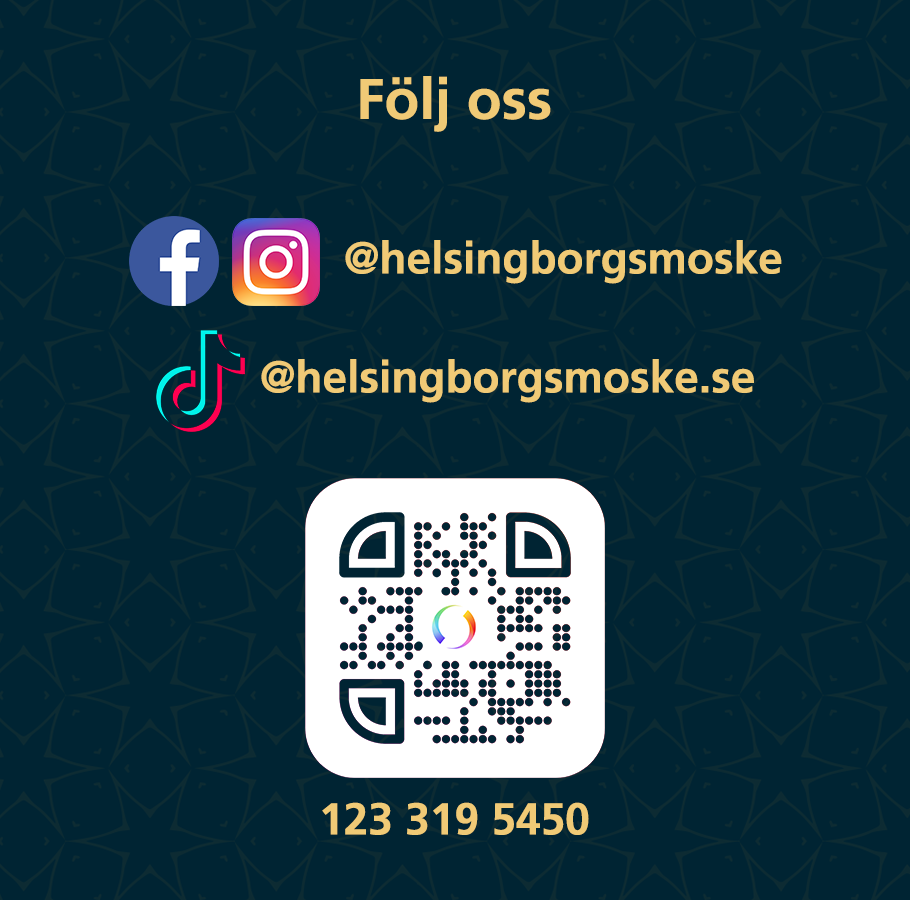
<style>
.page{position:relative;width:910px;height:900px;background:#002433}
.page>*{position:absolute;margin:0}
.t1{font:57.1px "FrutigerLTStd-Bold";color:#f0ca76}
.t2{font:44.4px "FrutigerLTStd-Bold";color:#f0ca76}
</style>
<div class="page">
<p class="t1" style="left:360px;top:76px;width:191px;height:56px">Följ oss</p>
<p class="t2" style="left:345px;top:240px;width:437px;height:44px">@helsingborgsmoske</p>
<p class="t2" style="left:261px;top:359px;width:493px;height:44px">@helsingborgsmoske.se</p>
<p class="t2" style="left:322px;top:802px;width:267px;height:33px">123 319 5450</p>
</div>
